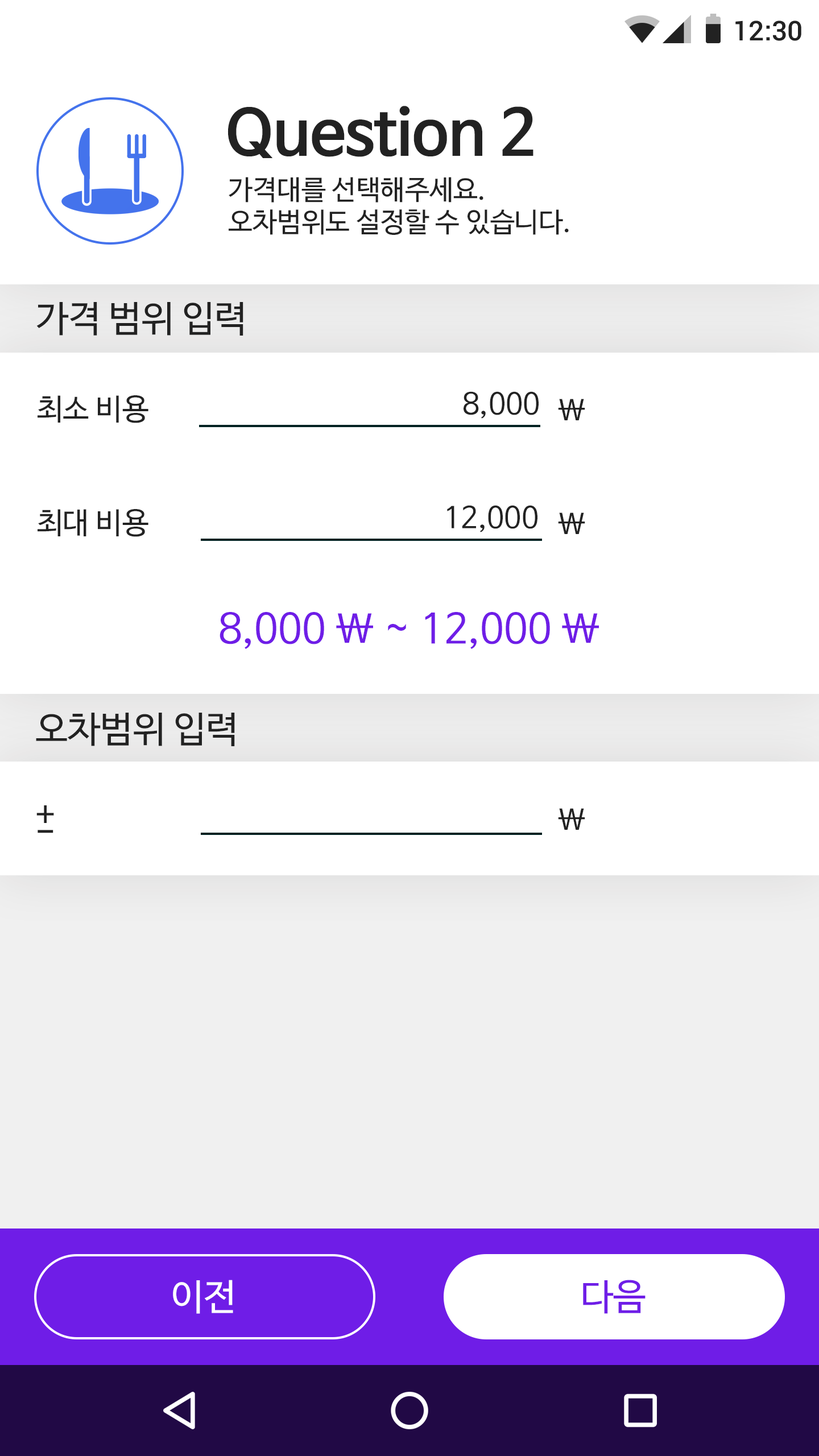
<style>
.page{position:relative;width:819px;height:1456px;background:#ffffff}
.page>*{position:absolute;margin:0}
.t1{font:27.3px "Roboto-Medium";color:#222222}
.t2{font:62.6px "NanumBarunGothicBold";color:#222222}
.t3{font:27.3px "NanumBarunGothic";color:#222222}
.t4{font:36.4px "NanumBarunGothic";color:#222222}
.t5{font:29.6px "NanumBarunGothic";color:#222222}
.t6{font:40.9px "NanumBarunGothic";color:#6f1de7}
.t7{font:36.4px "NanumBarunGothic";color:#ffffff}
.t8{font:36.4px "NanumBarunGothic";color:#6f1de7}
</style>
<div class="page">
<p class="t1" style="left:735px;top:20px;width:66px;height:21px">12:30</p>
<p class="t2" style="left:227px;top:106px;width:306px;height:52px">Question 2</p>
<p class="t3" style="left:229px;top:177px;width:340px;height:58px">가격대를 선택해주세요.<br>오차범위도 설정할 수 있습니다.</p>
<p class="t4" style="left:36px;top:302px;width:207px;height:34px">가격 범위 입력</p>
<p class="t5" style="left:38px;top:395px;width:110px;height:28px">최소 비용</p>
<p class="t5" style="left:464px;top:391px;width:75px;height:28px">8,000</p>
<p class="t5" style="left:558px;top:399px;width:27px;height:21px">\</p>
<p class="t5" style="left:38px;top:509px;width:110px;height:28px">최대 비용</p>
<p class="t5" style="left:447px;top:505px;width:90px;height:27px">12,000</p>
<p class="t5" style="left:558px;top:512px;width:27px;height:22px">\</p>
<p class="t6" style="left:220px;top:612px;width:379px;height:37px">8,000 \ ~ 12,000 \</p>
<p class="t4" style="left:36px;top:713px;width:199px;height:33px">오차범위 입력</p>
<p class="t4" style="left:36px;top:805px;width:18px;height:18px">+</p>
<p class="t5" style="left:558px;top:808px;width:27px;height:22px">\</p>
<p class="t4" style="left:38px;top:830px;width:15px;height:3px">-</p>
<p class="t7" style="left:173px;top:1280px;width:60px;height:34px">이전</p>
<p class="t8" style="left:583px;top:1280px;width:63px;height:34px">다음</p>
</div>
